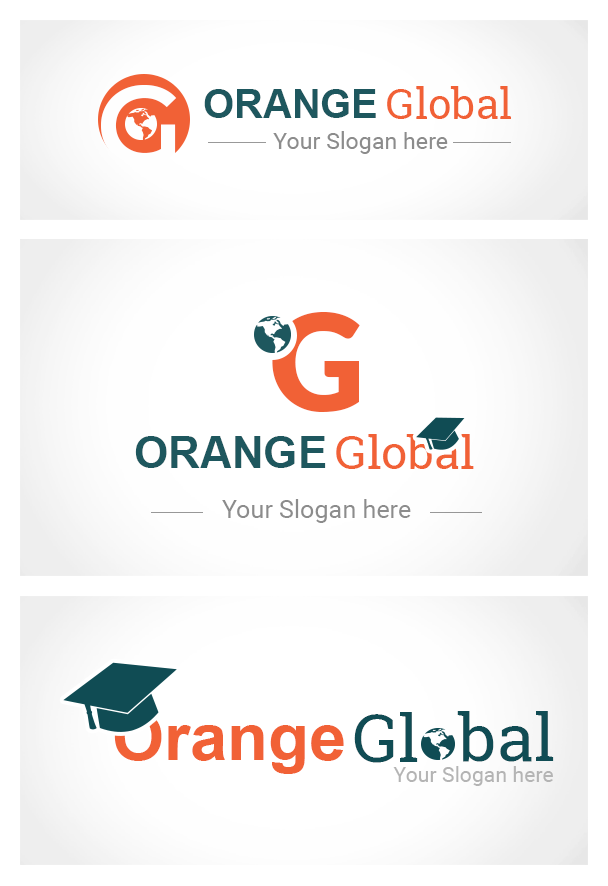
<style>
.page{position:relative;width:608px;height:886px;background:#ffffff}
.page>*{position:absolute;margin:0}
.t1{font:113px "Montserrat-SemiBold";color:#fefefe}
.t2{font:39.6px "Arial-BoldMT";color:#1e575e}
.t3{font:41.9px "RobotoSlab-Regular";color:#f16136}
.t4{font:23.1px "Roboto-Regular";color:#8c8c8c}
.t5{font:134.3px "Lato-Black";color:#f16136}
.t6{font:44px "Arial-BoldMT";color:#1e575e}
.t7{font:46.5px "RobotoSlab-Regular";color:#f16136}
.t8{font:25px "Roboto-Regular";color:#8c8c8c}
.t9{font:65.8px "Arial-BoldMT";color:#f16136}
.t10{font:65.8px "RobotoSlab-Regular";color:#104c54}
.t11{font:20.9px "Roboto-Regular";color:#b4b4b4}
</style>
<div class="page">
<p class="t1" style="left:101px;top:85px;width:76px;height:81px">G</p>
<p class="t2" style="left:204px;top:89px;width:172px;height:29px">ORANGE</p>
<p class="t3" style="left:387px;top:86px;width:124px;height:33px">Global</p>
<p class="t4" style="left:273px;top:131px;width:175px;height:23px">Your Slogan here</p>
<p class="t5" style="left:272px;top:312px;width:88px;height:100px">G</p>
<p class="t6" style="left:135px;top:436px;width:191px;height:32px">ORANGE</p>
<p class="t7" style="left:336px;top:434px;width:138px;height:35px">Global</p>
<p class="t8" style="left:222px;top:499px;width:189px;height:24px">Your Slogan here</p>
<p class="t9" style="left:114px;top:712px;width:230px;height:62px">Orange</p>
<p class="t10" style="left:354px;top:712px;width:64px;height:51px">Gl</p>
<p class="t10" style="left:457px;top:711px;width:97px;height:51px">bal</p>
<p class="t11" style="left:393px;top:766px;width:160px;height:20px">Your Slogan here</p>
</div>
